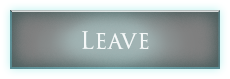
<style>
.page{position:relative;width:230px;height:79px}
.page>*{position:absolute;margin:0}
.t1{font:24px "TrajanPro3-Regular";color:#f1f1f1}
</style>
<div class="page">
<p class="t1" style="left:82px;top:31px;width:67px;height:18px">Leave</p>
</div>
